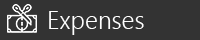
<style>
.page{position:relative;width:200px;height:40px;background:#333333}
.page>*{position:absolute;margin:0}
.t1{font:25px "SegoeUI-Semilight";color:#ffffff}
</style>
<div class="page">
<p class="t1" style="left:49px;top:11px;width:95px;height:24px">Expenses</p>
</div>
